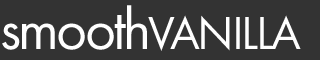
<style>
.page{position:relative;width:320px;height:60px;background:#333333}
.page>*{position:absolute;margin:0}
.t1{font:48px "FuturaPT-Book";letter-spacing:-0.05em;color:#ffffff;text-transform:uppercase}
.t2{font:60px "FuturaPT-Book";letter-spacing:-0.05em;color:#ffffff}
</style>
<div class="page">
<p class="t1" style="left:2px;top:5px;width:299px;height:46px"><span class="t2">smooth</span>vanilla</p>
</div>
